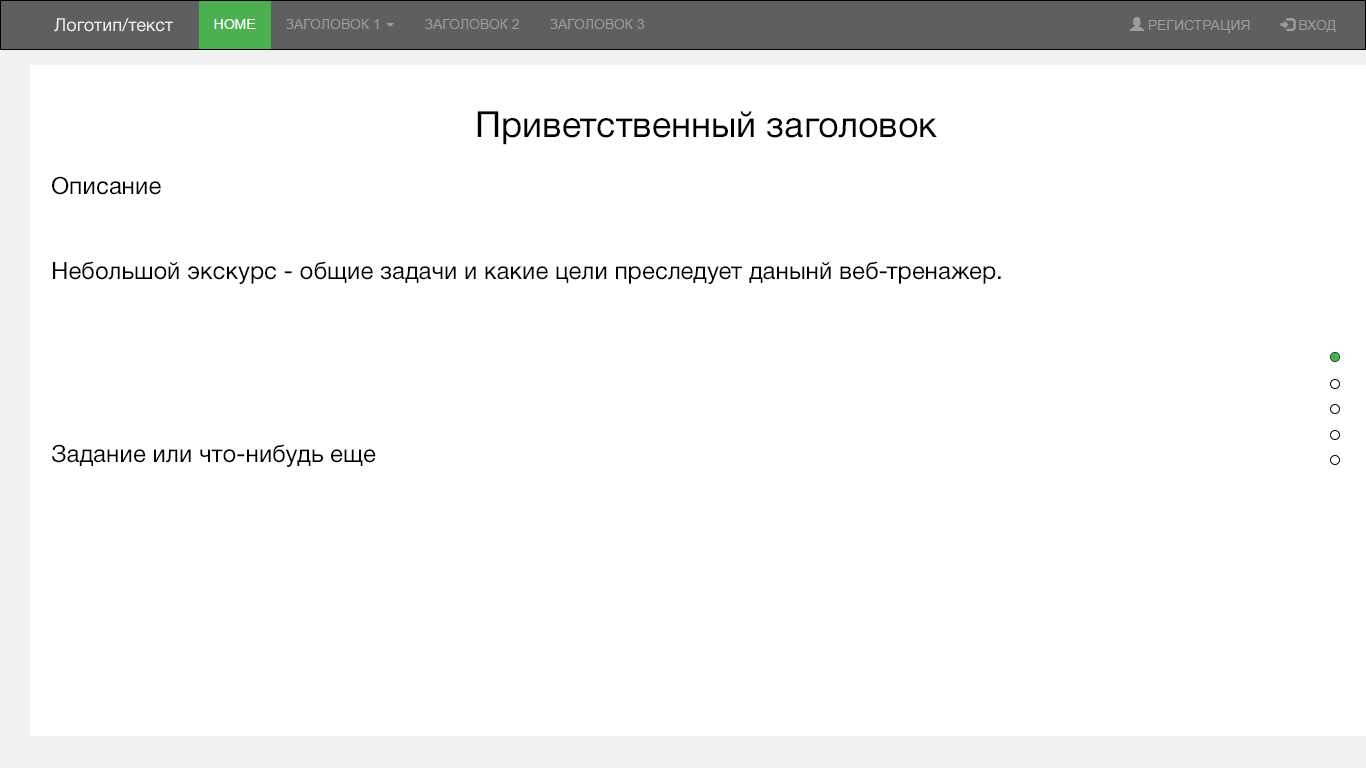
<style>
.page{position:relative;width:1366px;height:768px;background:#ffffff}
.page>*{position:absolute;margin:0}
.t1{font:18px "HelveticaNeueCyr-Roman";color:#f1f1f1}
.t2{font:36px "HelveticaNeueCyr-Roman";color:#000000}
.t3{font:24px "HelveticaNeueCyr-Roman";color:#000000}
</style>
<div class="page">
<p class="t1" style="left:54px;top:18px;width:119px;height:14px">Логотип/текст</p>
<p class="t2" style="left:52px;top:111px;width:885px;height:84px;text-align:center">Приветственный заголовок<br><span class="t3"><br>Описание</span></p>
<p class="t3" style="left:53px;top:261px;width:948px;height:23px">Небольшой экскурс - общие задачи и какие цели преследует данынй веб-тренажер.</p>
<p class="t3" style="left:52px;top:444px;width:324px;height:23px">Задание или что-нибудь еще</p>
</div>
